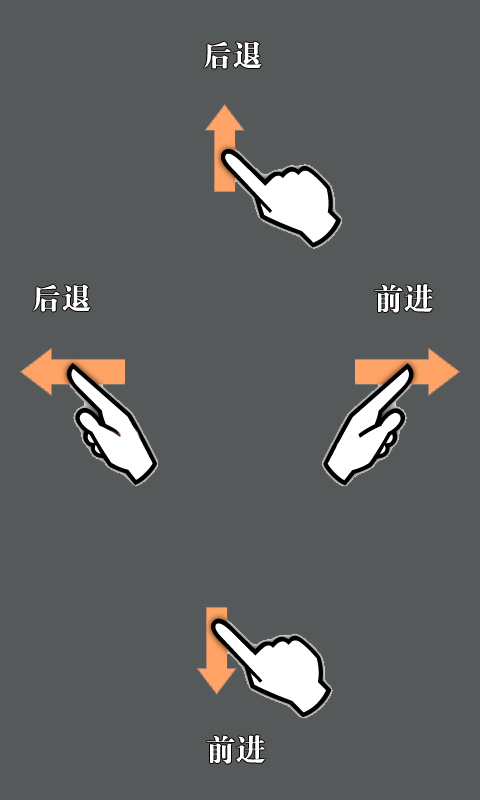
<style>
.page{position:relative;width:480px;height:800px;background:#56595a}
.page>*{position:absolute;margin:0}
.t1{font:30px "FZDBSK--GBK1-0";color:#ffffff}
</style>
<div class="page">
<p class="t1" style="left:204px;top:41px;width:58px;height:28px">后退</p>
<p class="t1" style="left:33px;top:284px;width:58px;height:28px">后退</p>
<p class="t1" style="left:375px;top:284px;width:58px;height:29px">前进</p>
<p class="t1" style="left:207px;top:735px;width:58px;height:29px">前进</p>
</div>
